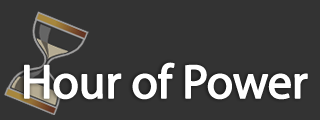
<style>
.page{position:relative;width:320px;height:120px;background:#333333}
.page>*{position:absolute;margin:0}
.t1{font:48px "MyriadPro-Regular";letter-spacing:-0.025em;color:#ffffff;font-weight:bold}
</style>
<div class="page">
<p class="t1" style="left:24px;top:62px;width:284px;height:38px">Hour of Power</p>
</div>
